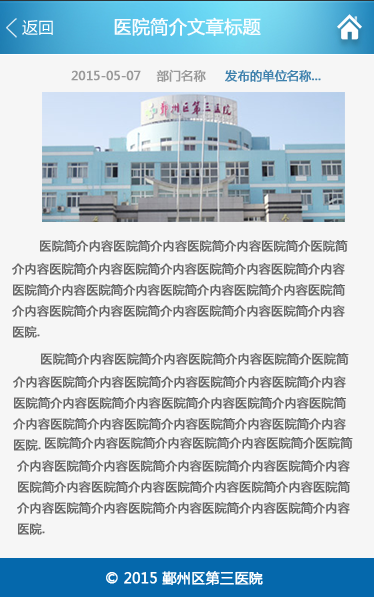
<style>
.page{position:relative;width:374px;height:597px;background:#f6f6f6}
.page>*{position:absolute;margin:0}
.t1{font:12px "MicrosoftYaHei";color:#999999;font-weight:bold}
.t2{font:12px "MicrosoftYaHei";color:#3e81ad;font-weight:bold}
.t3{font:12px "MicrosoftYaHei";color:#666666;font-weight:bold}
.t4{font:14px "MicrosoftYaHei";color:#666666;font-weight:bold}
.t5{font:14px "MicrosoftYaHei";color:#ffffff;font-weight:bold}
</style>
<div class="page">
<p class="t1" style="left:71px;top:69px;width:250px;height:13px">2015-05-07    部门名称     <span class="t2">发布的单位名称...</span></p>
<p class="t3" style="left:12px;top:240px;width:336px;height:98px"><span class="t4">      </span>医院简介内容医院简介内容医院简介内容医院简介医院简<br>介内容医院简介内容医院简介内容医院简介内容医院简介内容<br>医院简介内容医院简介内容医院简介内容医院简介内容医院简<br>介内容医院简介内容医院简介内容医院简介内容医院简介内容<br>医院.</p>
<p class="t3" style="left:13px;top:353px;width:336px;height:98px"><span class="t4">      </span>医院简介内容医院简介内容医院简介内容医院简介医院简<br>介内容医院简介内容医院简介内容医院简介内容医院简介内容<br>医院简介内容医院简介内容医院简介内容医院简介内容医院简<br>介内容医院简介内容医院简介内容医院简介内容医院简介内容<br>医院.</p>
<p class="t3" style="left:17px;top:437px;width:336px;height:98px"><span class="t4">      </span>医院简介内容医院简介内容医院简介内容医院简介医院简<br>介内容医院简介内容医院简介内容医院简介内容医院简介内容<br>医院简介内容医院简介内容医院简介内容医院简介内容医院简<br>介内容医院简介内容医院简介内容医院简介内容医院简介内容<br>医院.</p>
<p class="t5" style="left:106px;top:571px;width:157px;height:15px">© 2015 鄞州区第三医院</p>
</div>
